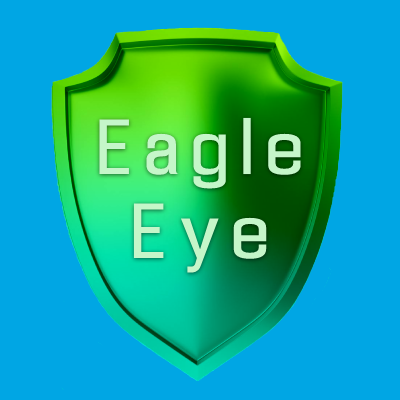
<style>
.page{position:relative;width:400px;height:400px;background:#00a6e4}
.page>*{position:absolute;margin:0}
.t1{font:72.8px "Enigmatic";letter-spacing:0.166em;color:#c5f6c9}
</style>
<div class="page">
<p class="t1" style="left:99px;top:117px;width:202px;height:156px;text-align:center">Eagle<br>Eye</p>
</div>
